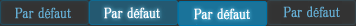
<style>
.page{position:relative;width:356px;height:26px;background:#333333}
.page>*{position:absolute;margin:0}
.t1{font:15.2px "MS-PMincho";color:#64aed4;font-weight:bold;scale:0.84 1}
.t2{font:15.2px "MS-PMincho";color:#ffffff;font-weight:bold;scale:0.84 1}
</style>
<div class="page">
<p class="t1" style="left:283px;top:6px;width:57px;height:12px">Par défaut</p>
<p class="t1" style="left:15px;top:7px;width:56px;height:12px">Par défaut</p>
<p class="t2" style="left:104px;top:7px;width:56px;height:12px">Par défaut</p>
<p class="t2" style="left:194px;top:8px;width:56px;height:12px">Par défaut</p>
</div>
